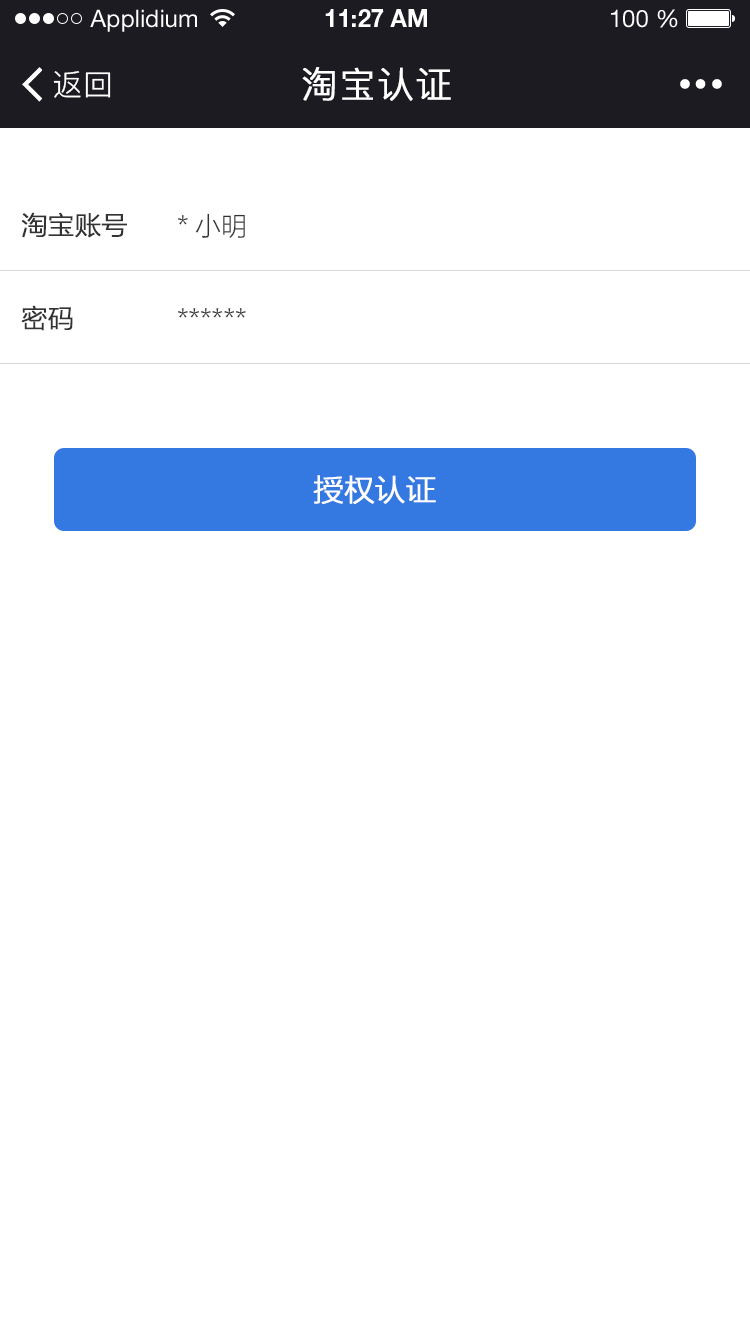
<style>
.page{position:relative;width:750px;height:1334px;background:#ffffff}
.page>*{position:absolute;margin:0}
.t1{font:24px "HelveticaNeueLTStd-Roman";color:#ffffff}
.t2{font:24px "HelveticaNeueLTStd-Bd";color:#ffffff}
.t3{font:30px "PingFang-SC-Regular";letter-spacing:0.025em;color:#ffffff}
.t4{font:36px "PingFang-SC-Regular";letter-spacing:0.025em;color:#ffffff;font-weight:bold}
.t5{font:26px "FZLTXHK--GBK1-0";color:#333333;font-weight:bold}
.t6{font:26px "FZLTXHK--GBK1-0";color:#333333}
.t7{font:30px "FZLTXHK--GBK1-0";color:#ffffff;font-weight:bold}
</style>
<div class="page">
<p class="t1" style="left:90px;top:9px;width:107px;height:23px">Applidium</p>
<p class="t2" style="left:325px;top:9px;width:102px;height:18px">11:27 AM</p>
<p class="t1" style="left:611px;top:9px;width:67px;height:19px">100 %</p>
<p class="t3" style="left:53px;top:71px;width:58px;height:27px">返回</p>
<p class="t4" style="left:302px;top:67px;width:149px;height:34px">淘宝认证</p>
<p class="t5" style="left:21px;top:212px;width:106px;height:26px">淘宝账号</p>
<p class="t6" style="left:178px;top:213px;width:67px;height:25px">*小明</p>
<p class="t5" style="left:21px;top:305px;width:52px;height:26px">密码</p>
<p class="t6" style="left:178px;top:308px;width:68px;height:10px">******</p>
<p class="t7" style="left:313px;top:475px;width:123px;height:29px">授权认证</p>
</div>
